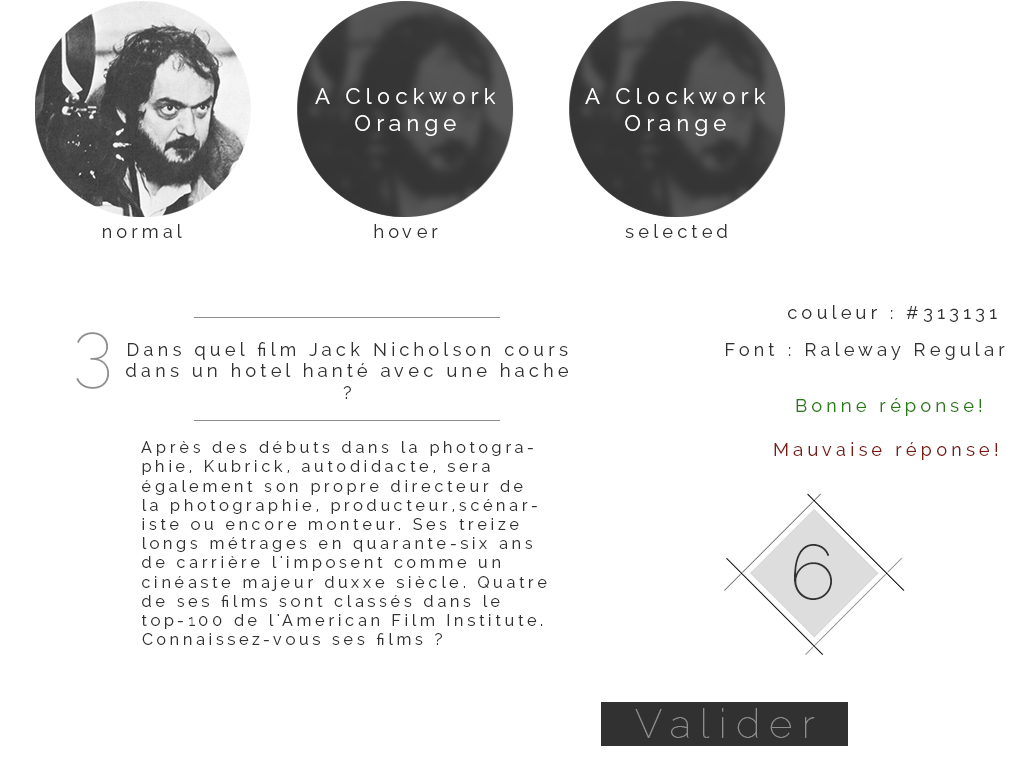
<style>
.page{position:relative;width:1024px;height:768px;background:#ffffff}
.page>*{position:absolute;margin:0}
.t1{font:22px "Raleway-Regular";letter-spacing:0.24em;color:#ffffff}
.t2{font:18px "Raleway-Regular";letter-spacing:0.24em;color:#313131}
.t3{font:77px "Raleway-Thin";letter-spacing:0.24em;color:#8e8e8e}
.t4{font:18px "Raleway-Regular";letter-spacing:0.24em;color:#287b12}
.t5{font:16px "Raleway-Regular";letter-spacing:0.24em;color:#313131}
.t6{font:18px "Raleway-Regular";letter-spacing:0.24em;color:#7b1a12}
.t7{font:77px "Raleway-Thin";letter-spacing:0.24em;color:#313131}
.t8{font:40px "Raleway-Thin";letter-spacing:0.24em;color:#8e8e8e}
</style>
<div class="page">
<p class="t1" style="left:315px;top:88px;width:181px;height:48px;text-align:center">A Clockwork Orange</p>
<p class="t1" style="left:585px;top:88px;width:181px;height:48px;text-align:center">A Clockwork Orange</p>
<p class="t2" style="left:103px;top:224px;width:79px;height:14px">normal</p>
<p class="t2" style="left:374px;top:224px;width:64px;height:14px">hover</p>
<p class="t2" style="left:625px;top:224px;width:102px;height:14px">selected</p>
<p class="t2" style="left:788px;top:305px;width:209px;height:17px">couleur : #313131</p>
<p class="t3" style="left:76px;top:332px;width:33px;height:57px">3</p>
<p class="t2" style="left:126px;top:342px;width:442px;height:57px;text-align:center">Dans quel film Jack Nicholson cours dans un hotel hanté avec une hache ?</p>
<p class="t2" style="left:726px;top:342px;width:279px;height:18px">Font : Raleway Regular</p>
<p class="t4" style="left:796px;top:398px;width:185px;height:18px">Bonne réponse!</p>
<p class="t5" style="left:141px;top:441px;width:406px;height:204px">Après des débuts dans la photographie, Kubrick, autodidacte, sera également son propre directeur de la photographie, producteur,scénariste ou encore monteur. Ses treize longs métrages en quarante-six ans de carrière l'imposent comme un cinéaste majeur duxxe siècle. Quatre de ses films sont classés dans le top-100 de l'American Film Institute.<br>Connaissez-vous ses films ?</p>
<p class="t6" style="left:774px;top:442px;width:223px;height:18px">Mauvaise réponse!</p>
<p class="t7" style="left:794px;top:544px;width:38px;height:56px">6</p>
<p class="t8" style="left:635px;top:708px;width:180px;height:30px">Valider</p>
</div>
